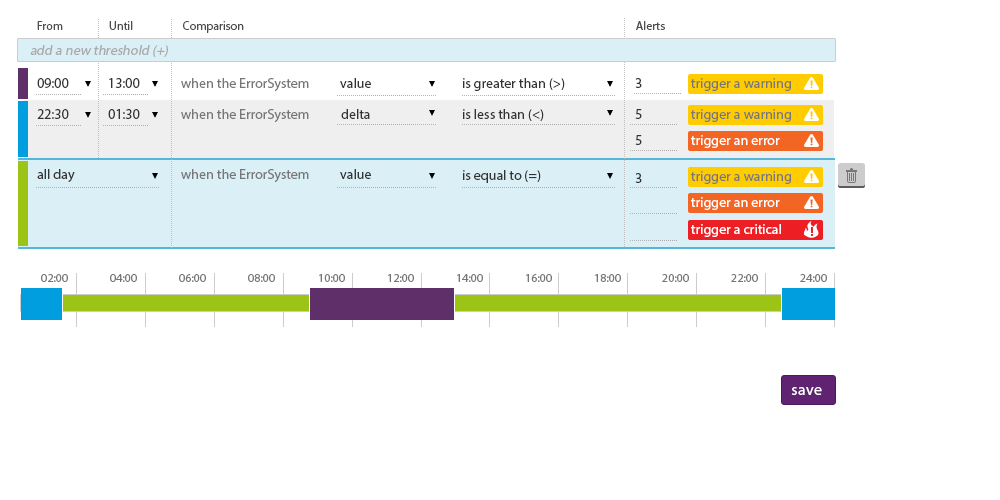
<style>
.page{position:relative;width:1000px;height:500px;background:#ffffff}
.page>*{position:absolute;margin:0}
.t1{font:12px "MyriadPro-Regular";color:#4d4d4d}
.t2{font:14px "MyriadPro-Regular";color:#aaaaaa;font-style:italic}
.t3{font:14px "MyriadPro-Regular";color:#333333}
.t4{font:14px "MyriadPro-Regular";color:#777777}
.t5{font:14px "MyriadPro-Regular";color:#ffffff}
.t6{font:12px "MyriadPro-Regular";color:#777777}
.t7{font:16px "MyriadPro-Regular";letter-spacing:0.025em;color:#ffffff}
</style>
<div class="page">
<p class="t1" style="left:37px;top:21px;width:26px;height:9px">From</p>
<p class="t1" style="left:109px;top:21px;width:24px;height:9px">Until</p>
<p class="t1" style="left:183px;top:21px;width:61px;height:12px">Comparison</p>
<p class="t1" style="left:636px;top:21px;width:29px;height:9px">Alerts</p>
<p class="t2" style="left:30px;top:45px;width:138px;height:12px">add a new threshold (+)</p>
<p class="t3" style="left:37px;top:78px;width:32px;height:10px">09:00</p>
<p class="t3" style="left:109px;top:78px;width:31px;height:10px">13:00</p>
<p class="t4" style="left:181px;top:78px;width:128px;height:14px">when the ErrorSystem</p>
<p class="t3" style="left:340px;top:78px;width:31px;height:10px">value</p>
<p class="t3" style="left:463px;top:78px;width:102px;height:13px">is greater than (&gt;)</p>
<p class="t3" style="left:635px;top:78px;width:7px;height:10px">3</p>
<p class="t4" style="left:691px;top:78px;width:100px;height:13px">trigger a warning</p>
<p class="t3" style="left:37px;top:109px;width:32px;height:10px">22:30</p>
<p class="t3" style="left:108px;top:109px;width:32px;height:10px">01:30</p>
<p class="t4" style="left:181px;top:109px;width:128px;height:14px">when the ErrorSystem</p>
<p class="t3" style="left:341px;top:109px;width:29px;height:10px">delta</p>
<p class="t3" style="left:463px;top:109px;width:81px;height:12px">is less than (&lt;)</p>
<p class="t3" style="left:635px;top:109px;width:7px;height:10px">5</p>
<p class="t4" style="left:691px;top:109px;width:100px;height:13px">trigger a warning</p>
<p class="t3" style="left:635px;top:135px;width:7px;height:10px">5</p>
<p class="t5" style="left:691px;top:135px;width:89px;height:13px">trigger an error</p>
<p class="t3" style="left:37px;top:169px;width:38px;height:13px">all day</p>
<p class="t4" style="left:181px;top:169px;width:128px;height:14px">when the ErrorSystem</p>
<p class="t3" style="left:340px;top:169px;width:31px;height:10px">value</p>
<p class="t3" style="left:463px;top:170px;width:78px;height:13px">is equal to (=)</p>
<p class="t3" style="left:635px;top:173px;width:7px;height:10px">3</p>
<p class="t4" style="left:691px;top:171px;width:100px;height:13px">trigger a warning</p>
<p class="t5" style="left:691px;top:197px;width:89px;height:13px">trigger an error</p>
<p class="t5" style="left:691px;top:224px;width:90px;height:13px">trigger a critical</p>
<p class="t6" style="left:41px;top:274px;width:27px;height:8px">02:00</p>
<p class="t6" style="left:110px;top:274px;width:27px;height:8px">04:00</p>
<p class="t6" style="left:179px;top:274px;width:27px;height:8px">06:00</p>
<p class="t6" style="left:248px;top:274px;width:27px;height:8px">08:00</p>
<p class="t6" style="left:319px;top:274px;width:26px;height:8px">10:00</p>
<p class="t6" style="left:388px;top:274px;width:26px;height:8px">12:00</p>
<p class="t6" style="left:457px;top:274px;width:26px;height:8px">14:00</p>
<p class="t6" style="left:526px;top:274px;width:26px;height:8px">16:00</p>
<p class="t6" style="left:595px;top:274px;width:26px;height:8px">18:00</p>
<p class="t6" style="left:662px;top:274px;width:27px;height:8px">20:00</p>
<p class="t6" style="left:731px;top:274px;width:27px;height:8px">22:00</p>
<p class="t6" style="left:800px;top:274px;width:27px;height:8px">24:00</p>
<p class="t7" style="left:791px;top:387px;width:31px;height:8px">save</p>
</div>
